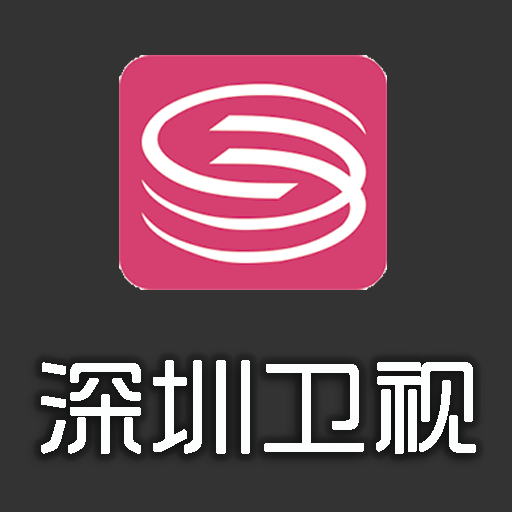
<style>
.page{position:relative;width:512px;height:512px;background:#333333}
.page>*{position:absolute;margin:0}
.t1{font:106.7px "SJshishang-Regular";letter-spacing:0.02em;color:#fcfdfd;font-weight:bold}
</style>
<div class="page">
<p class="t1" style="left:41px;top:360px;width:435px;height:94px">深圳卫视</p>
</div>
